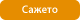
<style>
.page{position:relative;width:80px;height:20px;background:#e68d00}
.page>*{position:absolute;margin:0}
.t1{font:11px "MyriadPro-Semibold";color:#ffffff}
</style>
<div class="page">
<p class="t1" style="left:22px;top:5px;width:36px;height:8px">Сажето</p>
</div>
